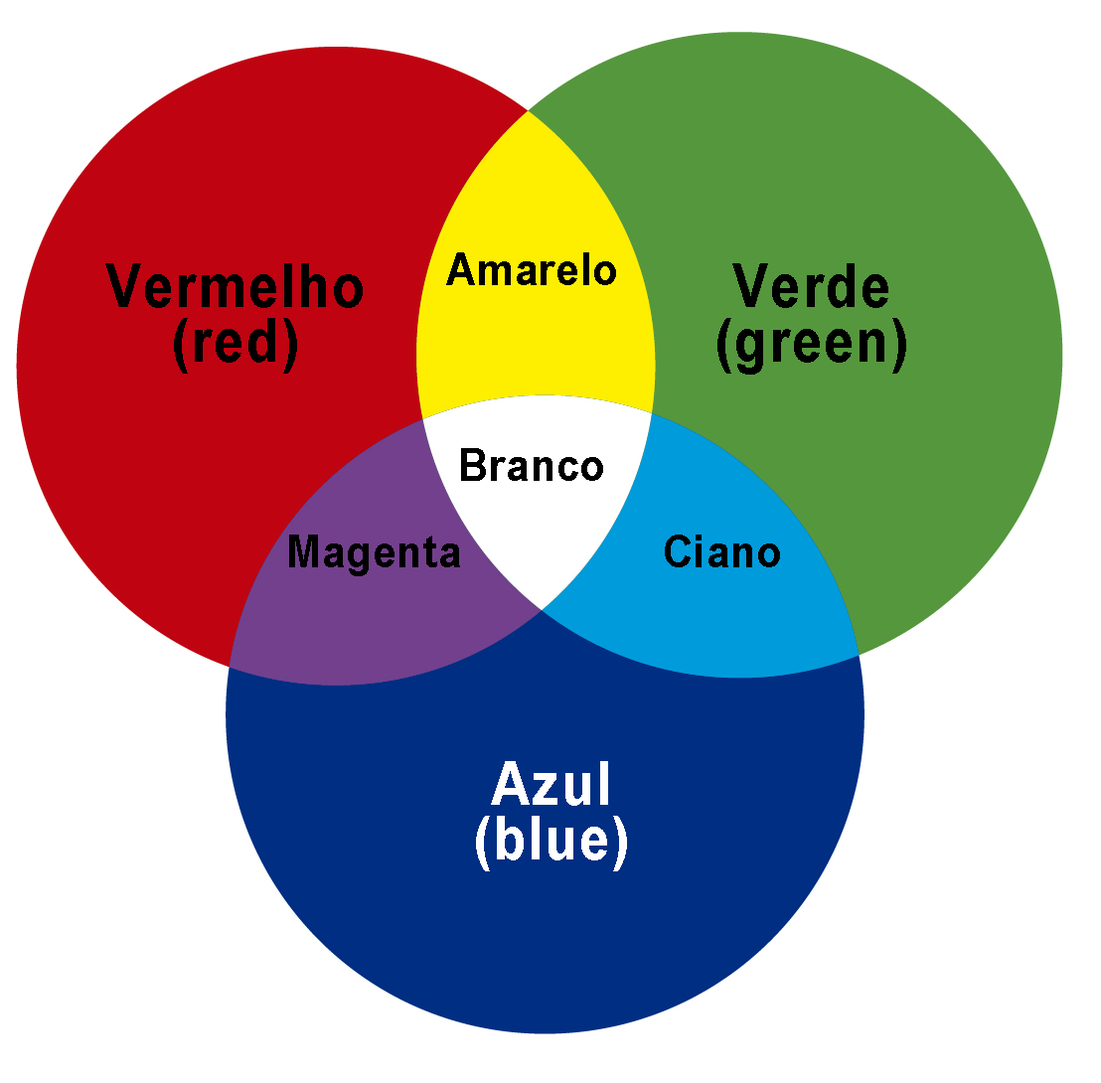
<style>
.page{position:relative;width:1101px;height:1083px;background:#ffffff}
.page>*{position:absolute;margin:0}
.t1{font:45.7px "ArialNarrow-Bold";letter-spacing:0.03em;color:#000000;scale:1.09 1}
.t2{font:60.3px/54.7px "ArialNarrow-Bold";letter-spacing:0.03em;color:#000000;scale:1.09 1}
.t3{font:60.3px/54.7px "ArialNarrow-Bold";letter-spacing:0.03em;color:#ffffff;scale:1.09 1}
</style>
<div class="page">
<p class="t1" style="left:446px;top:252px;width:170px;height:33px">Amarelo</p>
<p class="t2" style="left:105px;top:263px;width:258px;height:111px;text-align:center">Vermelho<br>(red)</p>
<p class="t2" style="left:717px;top:263px;width:189px;height:112px;text-align:center">Verde<br>(green)</p>
<p class="t1" style="left:461px;top:448px;width:142px;height:33px">Branco</p>
<p class="t1" style="left:289px;top:535px;width:171px;height:41px">Magenta</p>
<p class="t1" style="left:665px;top:535px;width:115px;height:32px">Ciano</p>
<p class="t3" style="left:476px;top:761px;width:151px;height:110px;text-align:center">Azul<br>(blue)</p>
</div>
